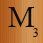
<style>
.page{position:relative;width:43px;height:43px}
.page>*{position:absolute;margin:0}
.t1{font:30px "TimesNewRomanPSMT";color:#0c0c0b}
.t2{font:12px "TimesNewRomanPSMT";color:#0c0c0b}
</style>
<div class="page">
<p class="t1" style="left:8px;top:7px;width:27px;height:20px">M</p>
<p class="t2" style="left:33px;top:28px;width:5px;height:9px">3</p>
</div>
